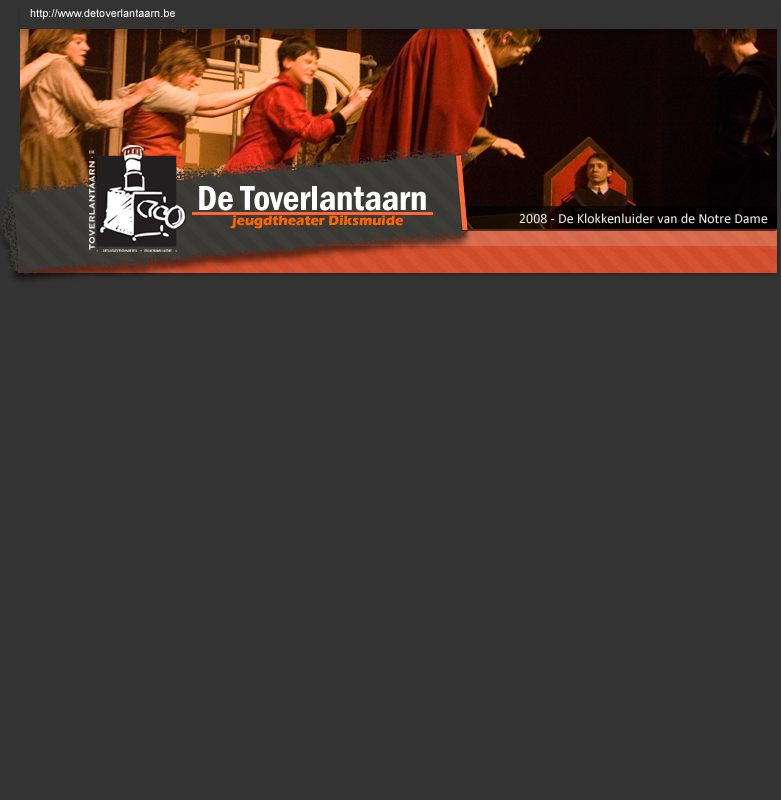
<style>
.page{position:relative;width:781px;height:800px;background:#333333}
.page>*{position:absolute;margin:0}
.t1{font:11px "ArialMT";color:#ffffff}
.t2{font:36px "FranklinGothic-DemiCond";color:#ffffff}
.t3{font:14px "Calibri";color:#e8e8e8}
</style>
<div class="page">
<p class="t1" style="left:30px;top:9px;width:145px;height:11px">http://www.detoverlantaarn.be</p>
<p class="t2" style="left:199px;top:186px;width:227px;height:25px">De Toverlantaarn</p>
<p class="t3" style="left:519px;top:213px;width:249px;height:11px">2008 - De Klokkenluider van de Notre Dame</p>
</div>
